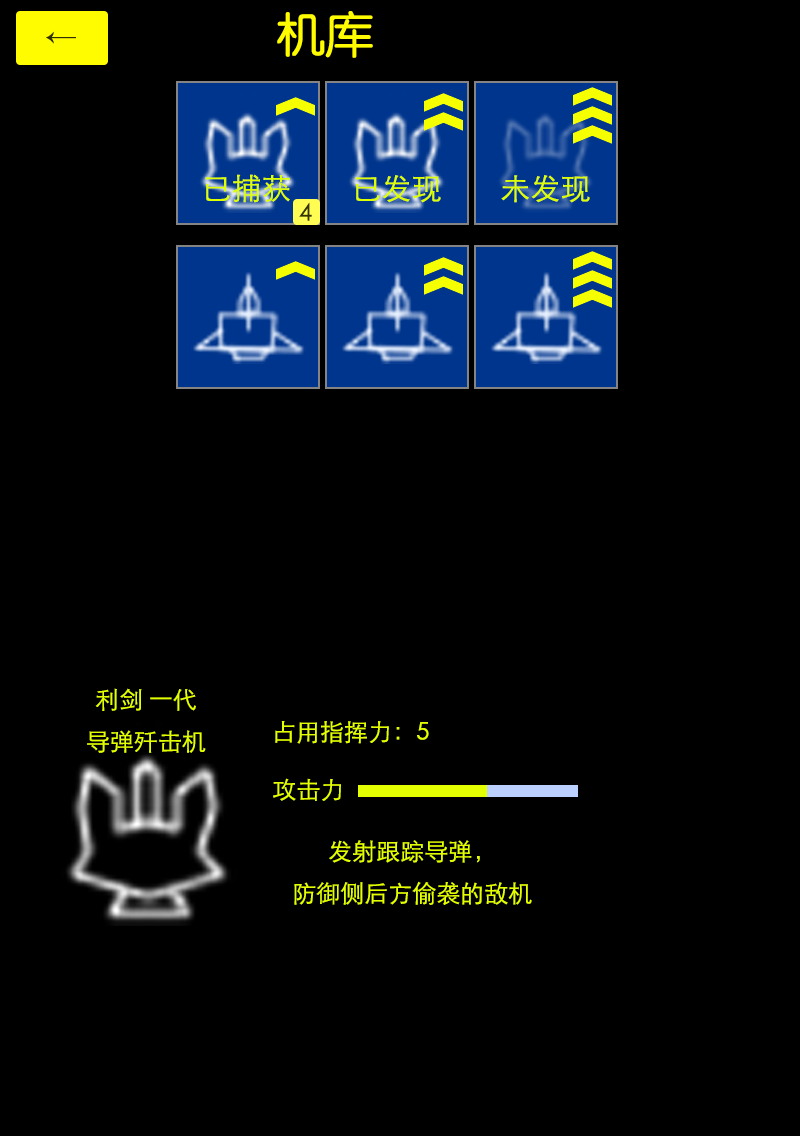
<style>
.page{position:relative;width:800px;height:1136px;background:#000000}
.page>*{position:absolute;margin:0}
.t1{font:48px "JZunYuan";color:#fffc00}
.t2{font:30px "STXihei";color:#deff00}
.t3{font:24px "STXihei";color:#353400}
.t4{font:24px "STXihei";color:#e4ff00}
</style>
<div class="page">
<p class="t1" style="left:277px;top:11px;width:96px;height:47px">机库</p>
<p class="t2" style="left:205px;top:174px;width:85px;height:29px">已捕获</p>
<p class="t2" style="left:355px;top:175px;width:86px;height:28px">已发现</p>
<p class="t2" style="left:501px;top:175px;width:89px;height:28px">未发现</p>
<p class="t3" style="left:299px;top:202px;width:13px;height:19px">4</p>
<p class="t4" style="left:87px;top:688px;width:119px;height:65px;text-align:center">利剑 一代<br>导弹歼击机</p>
<p class="t4" style="left:275px;top:721px;width:154px;height:23px">占用指挥力：5</p>
<p class="t4" style="left:273px;top:778px;width:68px;height:23px">攻击力</p>
<p class="t4" style="left:294px;top:840px;width:238px;height:65px;text-align:center">发射跟踪导弹，<br>防御侧后方偷袭的敌机</p>
</div>
